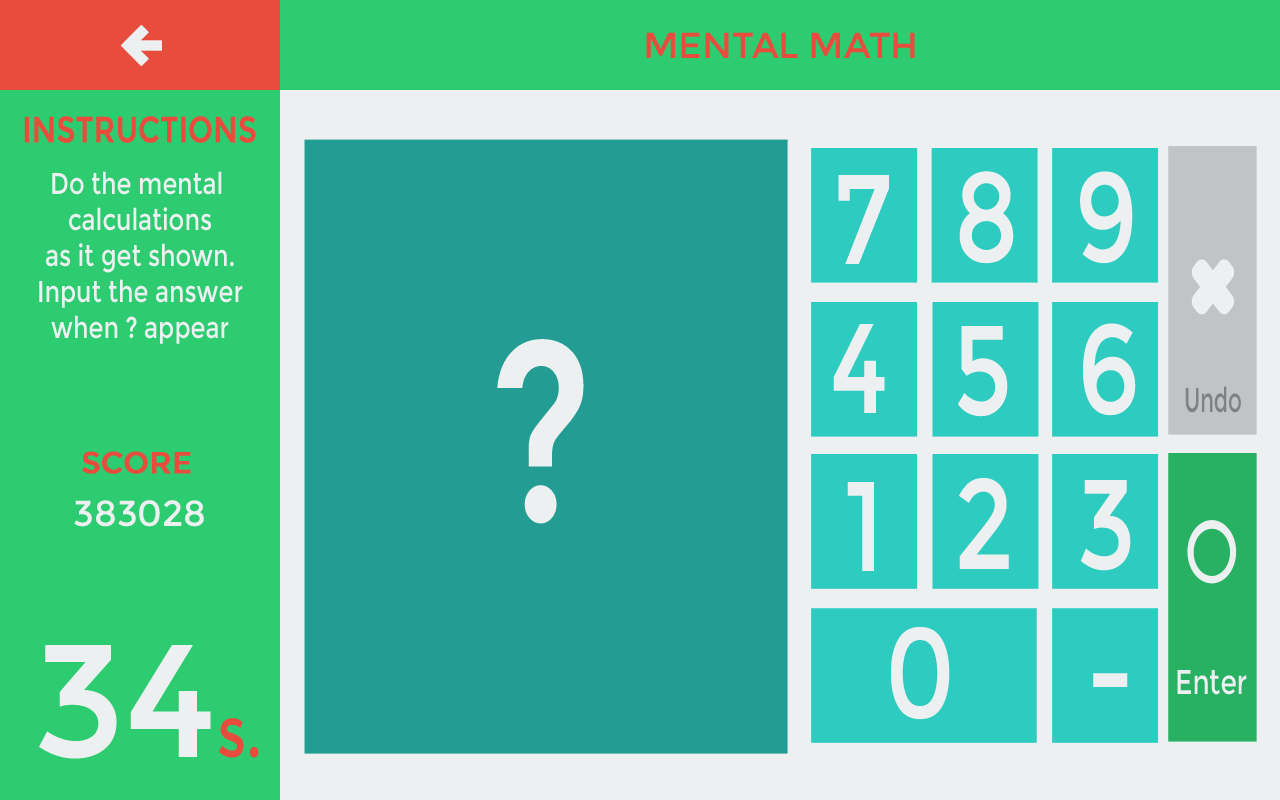
<style>
.page{position:relative;width:1280px;height:800px;background:#239d94}
.page>*{position:absolute;margin:0}
.t1{font:36px "Montserrat-Regular";color:#e84c3d}
.t2{font:36px "Montserrat-Regular";color:#e84c3d;text-transform:uppercase;font-weight:bold;scale:0.8 1}
.t3{font:30px "Montserrat-Regular";color:#ecf0f1;scale:0.8 1}
.t4{font:127.4px "Montserrat-Regular";color:#ecf0f1;scale:0.8 1}
.t5{font:256px "Montserrat-Regular";color:#ecf0f1;scale:0.8 1}
.t6{font:34.4px "Montserrat-Regular";color:#7f8182;scale:0.62 1}
.t7{font:30px "Montserrat-Regular";color:#e84c3d;font-weight:bold}
.t8{font:36px "Montserrat-Regular";color:#ecf0f1}
.t9{font:160px "Montserrat-Regular";color:#ecf0f1}
.t10{font:34.4px "Montserrat-Regular";color:#ecf0f1;scale:0.77 1}
.t11{font:72px "Montserrat-Regular";color:#e84c3d;scale:0.8 1}
</style>
<div class="page">
<p class="t1" style="left:646px;top:32px;width:269px;height:26px">MENTAL MATH</p>
<p class="t2" style="left:24px;top:116px;width:232px;height:27px">Instructions</p>
<p class="t3" style="left:39px;top:171px;width:204px;height:173px;text-align:center">Do the mental <br>calculations<br>as it get shown.<br>Input the answer<br>when ? appear</p>
<p class="t4" style="left:959px;top:171px;width:55px;height:93px">8</p>
<p class="t4" style="left:1080px;top:171px;width:53px;height:93px">9</p>
<p class="t4" style="left:838px;top:175px;width:51px;height:89px">7</p>
<p class="t4" style="left:833px;top:324px;width:52px;height:89px">4</p>
<p class="t4" style="left:958px;top:326px;width:50px;height:91px">5</p>
<p class="t4" style="left:1083px;top:323px;width:53px;height:93px">6</p>
<p class="t5" style="left:497px;top:339px;width:87px;height:185px">?</p>
<p class="t6" style="left:1185px;top:386px;width:56px;height:27px">Undo</p>
<p class="t7" style="left:82px;top:451px;width:109px;height:23px">SCORE</p>
<p class="t4" style="left:847px;top:482px;width:27px;height:89px">1</p>
<p class="t4" style="left:959px;top:478px;width:50px;height:91px">2</p>
<p class="t4" style="left:1080px;top:480px;width:51px;height:91px">3</p>
<p class="t8" style="left:74px;top:500px;width:130px;height:27px">383028</p>
<p class="t4" style="left:891px;top:627px;width:59px;height:93px">0</p>
<p class="t9" style="left:39px;top:645px;width:172px;height:114px">34</p>
<p class="t4" style="left:1093px;top:673px;width:35px;height:14px">-</p>
<p class="t10" style="left:1177px;top:670px;width:70px;height:25px">Enter</p>
<p class="t11" style="left:219px;top:718px;width:40px;height:40px">s.</p>
</div>
